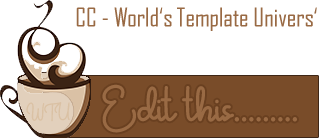
<style>
.page{position:relative;width:320px;height:139px;background:#ffffff}
.page>*{position:absolute;margin:0}
.t1{font:25px "AgencyFB-Reg";color:#996a44}
.t2{font:35px "CrunchyPasta";color:#996a44}
.t3{font:35px "MyriadPro-Regular";color:#996a44}
.t4{font:15px "CrunchyPasta";color:#dac1a4}
</style>
<div class="page">
<p class="t1" style="left:76px;top:7px;width:241px;height:24px">CC - World‘s Template Univers‘</p>
<p class="t2" style="left:102px;top:84px;width:195px;height:49px">Edit this<span class="t3">.........</span></p>
<p class="t4" style="left:26px;top:102px;width:44px;height:20px">WTU</p>
</div>
